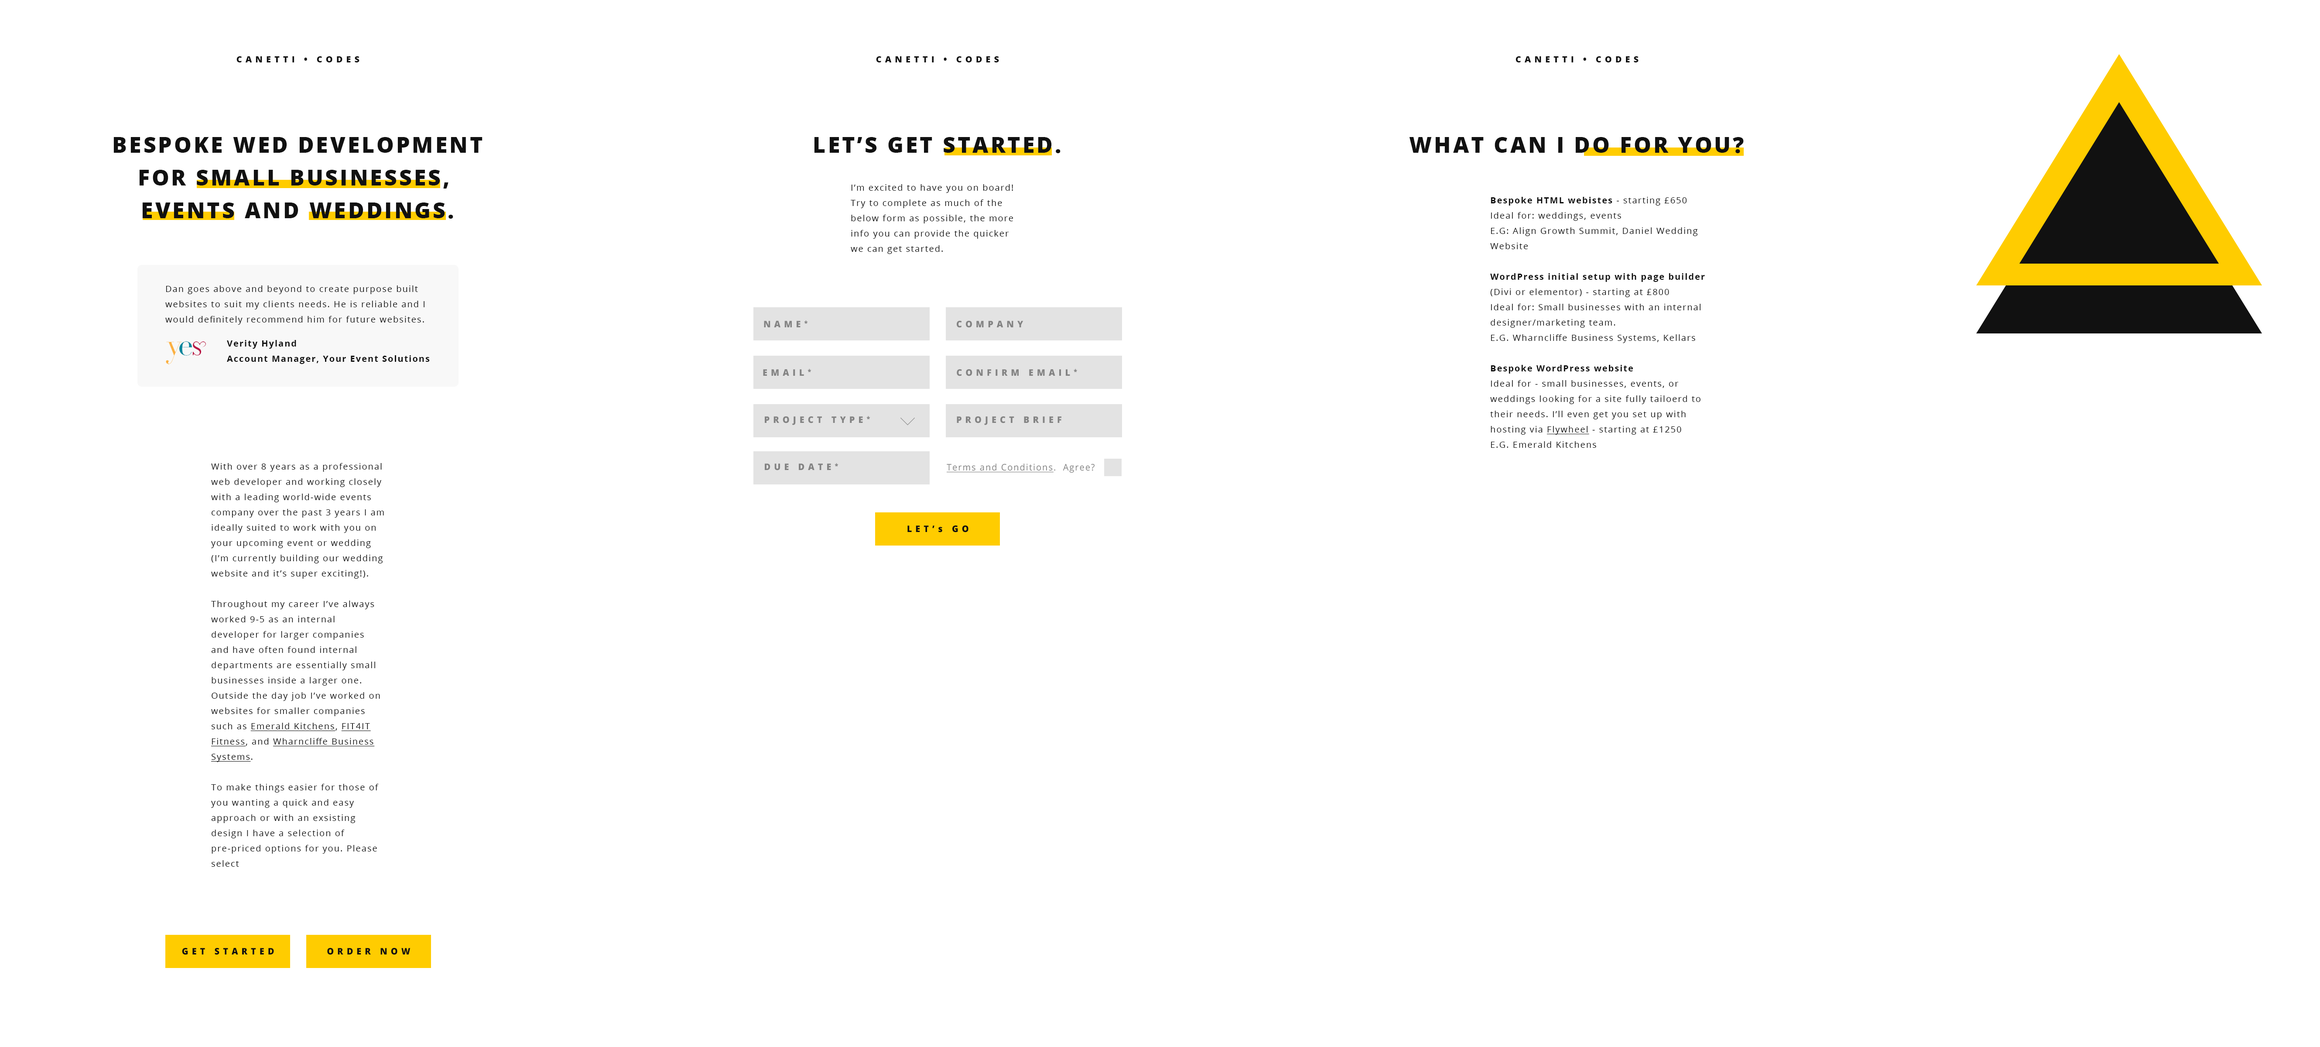
<style>
.page{position:relative;width:2320px;height:1047px;background:#ffffff}
.page>*{position:absolute;margin:0}
.t1{font:8.7px "OpenSans-Extrabold";letter-spacing:0.4em;color:#111111}
.t2{font:21.8px/32.7px "OpenSans-Extrabold";letter-spacing:0.1em;color:#111111}
.t3{font:21.8px "OpenSans-Extrabold";letter-spacing:0.1em;color:#111111}
.t4{font:8.7px/15.3px "OpenSans";letter-spacing:0.1em;color:#111111}
.t5{font:8.7px/15.3px "OpenSans-Bold";letter-spacing:0.1em;color:#111111}
.t6{font:8.7px/15.3px "OpenSans";letter-spacing:0.1em;color:#111111;text-decoration:underline}
.t7{font:9px "OpenSans-Extrabold";letter-spacing:0.4em;color:#838383;scale:0.97 1}
.t8{font:6.5px "OpenSans-Extrabold";letter-spacing:0.4em;color:#838383;scale:0.97 1}
.t9{font:9px "OpenSans";letter-spacing:0.1em;color:#838383;text-decoration:underline;scale:0.97 1}
.t10{font:9px "OpenSans";letter-spacing:0.1em;color:#838383;scale:0.97 1}
.t11{font:9px "OpenSans-Extrabold";letter-spacing:0.4em;color:#111111;scale:0.97 1}
</style>
<div class="page">
<p class="t1" style="left:236px;top:56px;width:123px;height:6px">CANETTI • CODES</p>
<p class="t1" style="left:876px;top:56px;width:123px;height:6px">CANETTI • CODES</p>
<p class="t1" style="left:1516px;top:56px;width:123px;height:6px">CANETTI • CODES</p>
<p class="t2" style="left:113px;top:137px;width:370px;height:82px;text-align:center">BESPOKE WED DEVELOPMENT<br>FOR SMALL BUSINESSES, <br>EVENTS AND WEDDINGS.</p>
<p class="t3" style="left:814px;top:137px;width:247px;height:16px">LET’S GET STARTED.</p>
<p class="t3" style="left:1409px;top:137px;width:335px;height:16px">WHAT CAN I DO FOR YOU?</p>
<p class="t4" style="left:851px;top:184px;width:162px;height:70px">I’m excited to have you on board! Try to complete as much of the below form as possible, the more info you can provide the quicker we can get started.</p>
<p class="t4" style="left:1490px;top:197px;width:215px;height:251px"><span class="t5">Bespoke HTML webistes</span> - starting £650<br>Ideal for: weddings, events<br>E.G: Align Growth Summit, Daniel Wedding Website<br><br><span class="t5">WordPress initial setup with page builder</span> (Divi or elementor) - starting at £800<br>Ideal for: Small businesses with an internal designer/marketing team.<br>E.G. Wharncliffe Business Systems, Kellars<br><br><span class="t5">Bespoke WordPress website<br></span>Ideal for - small businesses, events, or weddings looking for a site fully tailoerd to their needs. I’ll even get you set up with hosting via <span class="t6">Flywheel</span> - starting at £1250<br>E.G. Emerald Kitchens</p>
<p class="t4" style="left:165px;top:285px;width:259px;height:40px">Dan goes above and beyond to create purpose built websites to suit my clients needs. He is reliable and I would definitely recommend him for future websites.</p>
<p class="t7" style="left:764px;top:320px;width:44px;height:7px">NAME<span class="t8">*</span></p>
<p class="t7" style="left:957px;top:321px;width:67px;height:7px">COMPANY</p>
<p class="t5" style="left:227px;top:340px;width:203px;height:24px">Verity Hyland<br>Account Manager, Your Event Solutions</p>
<p class="t7" style="left:763px;top:369px;width:48px;height:7px">EMAIL<span class="t8">*</span></p>
<p class="t7" style="left:957px;top:369px;width:120px;height:7px">CONFIRM EMAIL<span class="t8">*</span></p>
<p class="t7" style="left:765px;top:416px;width:105px;height:9px">PROJECT TYPE<span class="t8">*</span></p>
<p class="t7" style="left:957px;top:416px;width:104px;height:9px">PROJECT BRIEF</p>
<p class="t4" style="left:211px;top:463px;width:173px;height:403px">With over 8 years as a professional web developer and working closely with a leading world-wide events company over the past 3 years I am ideally suited to work with you on your upcoming event or wedding (I’m currently building our wedding website and it’s super exciting!).<br><br>Throughout my career I’ve always worked 9-5 as an internal developer for larger companies and have often found internal departments are essentially small businesses inside a larger one. Outside the day job I’ve worked on websites for smaller companies such as <span class="t6">Emerald Kitchens</span>, <span class="t6">FIT4IT Fitness</span>, and <span class="t6">Wharncliffe Business Systems</span>.<br><br>To make things easier for those of you wanting a quick and easy approach or with an exsisting design I have a selection of pre-priced options for you. Please select</p>
<p class="t7" style="left:765px;top:463px;width:73px;height:7px">DUE DATE<span class="t8">*</span></p>
<p class="t9" style="left:946px;top:463px;width:149px;height:10px">Terms and Conditions<span class="t10">.  Agree?</span></p>
<p class="t11" style="left:907px;top:525px;width:62px;height:7px">LET’s GO</p>
<p class="t11" style="left:182px;top:948px;width:92px;height:7px">GET STARTED</p>
<p class="t11" style="left:327px;top:948px;width:84px;height:7px">ORDER NOW</p>
</div>
